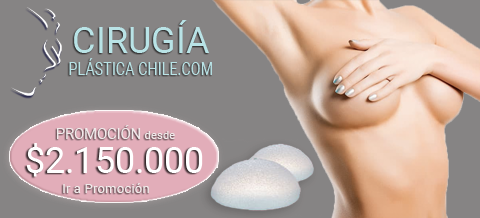
<style>
.page{position:relative;width:480px;height:218px;background:#868484}
.page>*{position:absolute;margin:0}
.t1{font:18px "Roboto-Regular";color:#b9e3e6;scale:0.8 1}
.t2{font:36px "Roboto-Regular";color:#b9e3e6}
.t3{font:14.6px "Roboto-Regular";color:#f0eaea}
.t4{font:11.4px "Roboto-Regular";color:#f0eaea}
.t5{font:35.8px "Roboto-Regular";color:#ffffff}
.t6{font:13.5px "Roboto-Regular";color:#f0eaea}
</style>
<div class="page">
<p class="t1" style="left:69px;top:20px;width:143px;height:55px;text-align:center"><span class="t2">CIRUGÍA<br></span>PLÁSTICA CHILE.COM</p>
<p class="t3" style="left:56px;top:125px;width:119px;height:14px">PROMOCIÓN <span class="t4">desde</span></p>
<p class="t5" style="left:26px;top:143px;width:177px;height:34px">$2.150.000</p>
<p class="t6" style="left:63px;top:183px;width:86px;height:10px">Ir a Promoción</p>
</div>
